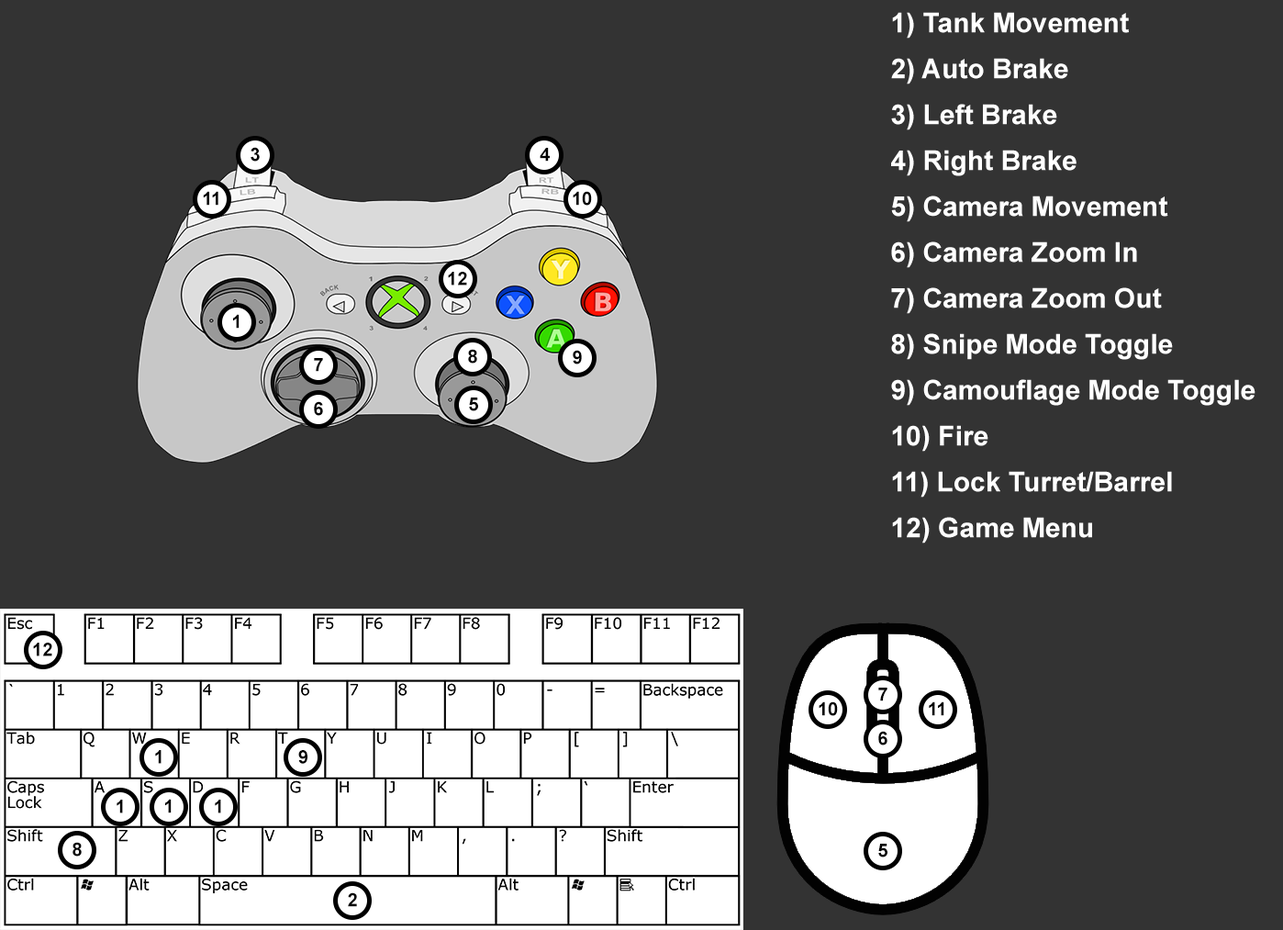
<style>
.page{position:relative;width:1283px;height:930px;background:#333333}
.page>*{position:absolute;margin:0}
.t1{font:27.5px/45.9px "Arial-BoldMT";color:#ffffff}
.t2{font:18.3px "Arial-BoldMT";color:#000000}
.t3{font:18.4px "Arial-BoldMT";color:#000000}
</style>
<div class="page">
<p class="t1" style="left:891px;top:12px;width:364px;height:531px">1) Tank Movement<br>2) Auto Brake<br>3) Left Brake<br>4) Right Brake<br>5) Camera Movement<br>6) Camera Zoom In<br>7) Camera Zoom Out<br>8) Snipe Mode Toggle<br>9) Camouflage Mode Toggle<br>10) Fire<br>11) Lock Turret/Barrel<br>12) Game Menu</p>
<p class="t2" style="left:251px;top:147px;width:9px;height:14px">3</p>
<p class="t2" style="left:540px;top:148px;width:10px;height:13px">4</p>
<p class="t2" style="left:203px;top:191px;width:15px;height:15px">11</p>
<p class="t2" style="left:573px;top:191px;width:19px;height:15px">10</p>
<p class="t3" style="left:448px;top:272px;width:19px;height:13px">12</p>
<p class="t2" style="left:233px;top:314px;width:6px;height:15px">1</p>
<p class="t2" style="left:468px;top:349px;width:9px;height:14px">8</p>
<p class="t2" style="left:573px;top:350px;width:9px;height:14px">9</p>
<p class="t2" style="left:314px;top:358px;width:9px;height:14px">7</p>
<p class="t2" style="left:314px;top:401px;width:9px;height:15px">6</p>
<p class="t2" style="left:469px;top:397px;width:9px;height:14px">5</p>
<p class="t3" style="left:33px;top:642px;width:19px;height:14px">12</p>
<p class="t2" style="left:878px;top:687px;width:9px;height:14px">7</p>
<p class="t2" style="left:819px;top:701px;width:19px;height:15px">10</p>
<p class="t2" style="left:929px;top:701px;width:15px;height:15px">11</p>
<p class="t2" style="left:878px;top:730px;width:9px;height:15px">6</p>
<p class="t3" style="left:155px;top:750px;width:6px;height:13px">1</p>
<p class="t3" style="left:298px;top:750px;width:9px;height:13px">9</p>
<p class="t3" style="left:117px;top:799px;width:6px;height:14px">1</p>
<p class="t2" style="left:165px;top:798px;width:7px;height:15px">1</p>
<p class="t3" style="left:215px;top:799px;width:6px;height:14px">1</p>
<p class="t2" style="left:72px;top:841px;width:10px;height:15px">8</p>
<p class="t2" style="left:878px;top:843px;width:9px;height:14px">5</p>
<p class="t2" style="left:348px;top:892px;width:9px;height:15px">2</p>
</div>
